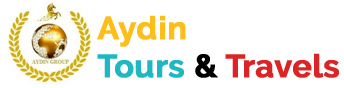
<style>
.page{position:relative;width:344px;height:88px;background:#ffffff}
.page>*{position:absolute;margin:0}
.t1{font:32px "Raleway-Bold";color:#dc2426;font-weight:bold}
.t2{font:32px "Raleway-Bold";color:#fdbe19;font-weight:bold}
.t3{font:32px "Raleway-Bold";color:#1db8c1;font-weight:bold}
.t4{font:32px "Raleway-Bold";color:#000000;font-weight:bold}
</style>
<div class="page">
<p class="t1" style="left:97px;top:15px;width:242px;height:63px"><span class="t2">Aydin<br></span><span class="t3">Tours </span><span class="t4">&amp;</span> Travels</p>
</div>
